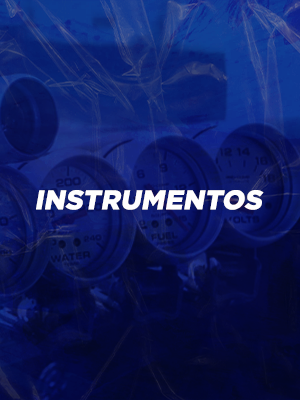
<style>
.page{position:relative;width:300px;height:400px}
.page>*{position:absolute;margin:0}
.t1{font:27px "Gotham-Black";letter-spacing:0.01em;color:#fffefe;text-transform:uppercase;font-style:italic}
</style>
<div class="page">
<p class="t1" style="left:36px;top:190px;width:228px;height:20px">instrumentos</p>
</div>
